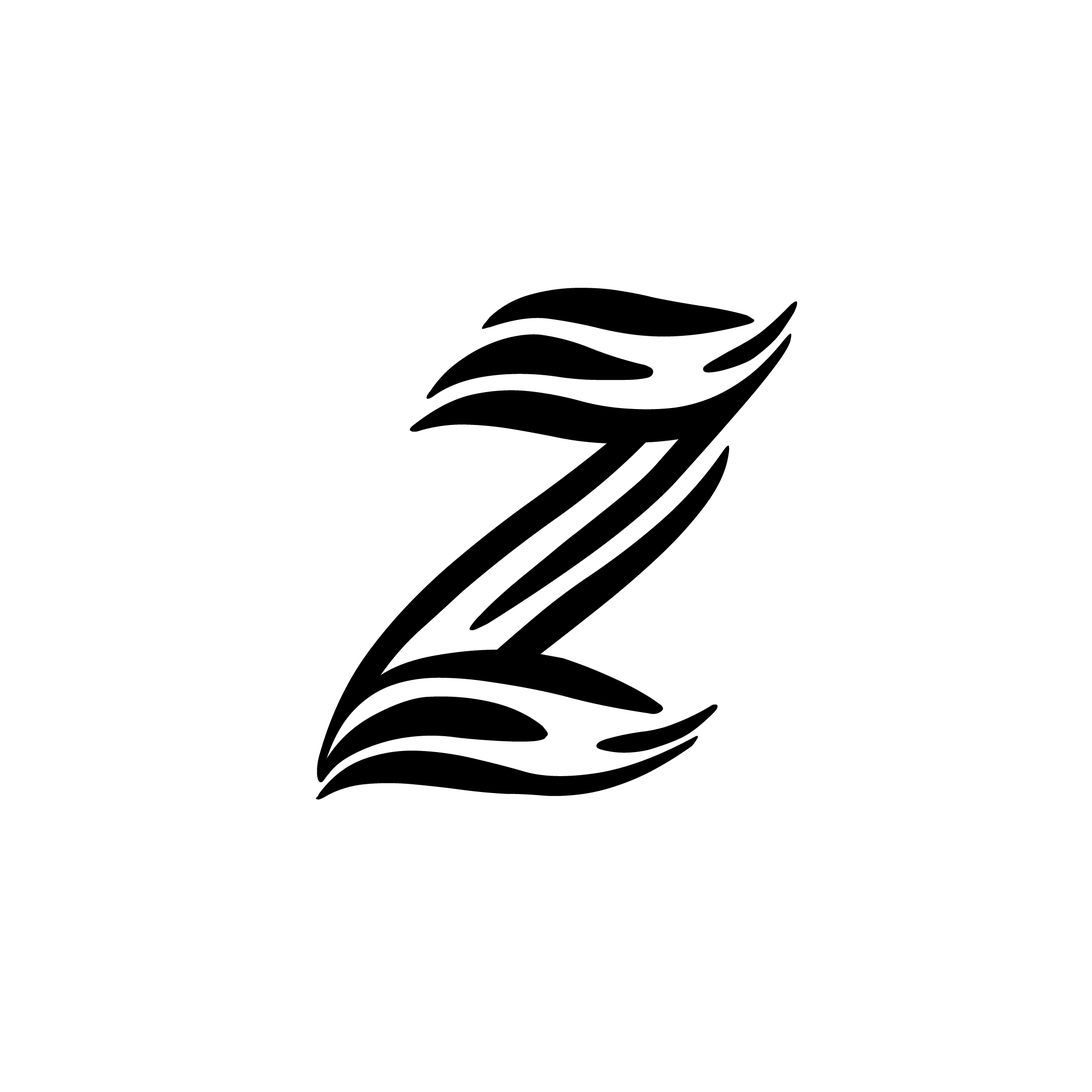
<style>
.page{position:relative;width:1092px;height:1092px;background:#ffffff}
.page>*{position:absolute;margin:0}
.t1{font:1075.1px "Akronim-Regular";letter-spacing:0.1em;color:#000000;font-style:italic}
</style>
<div class="page">
<p class="t1" style="left:316px;top:288px;width:481px;height:512px">z</p>
</div>
